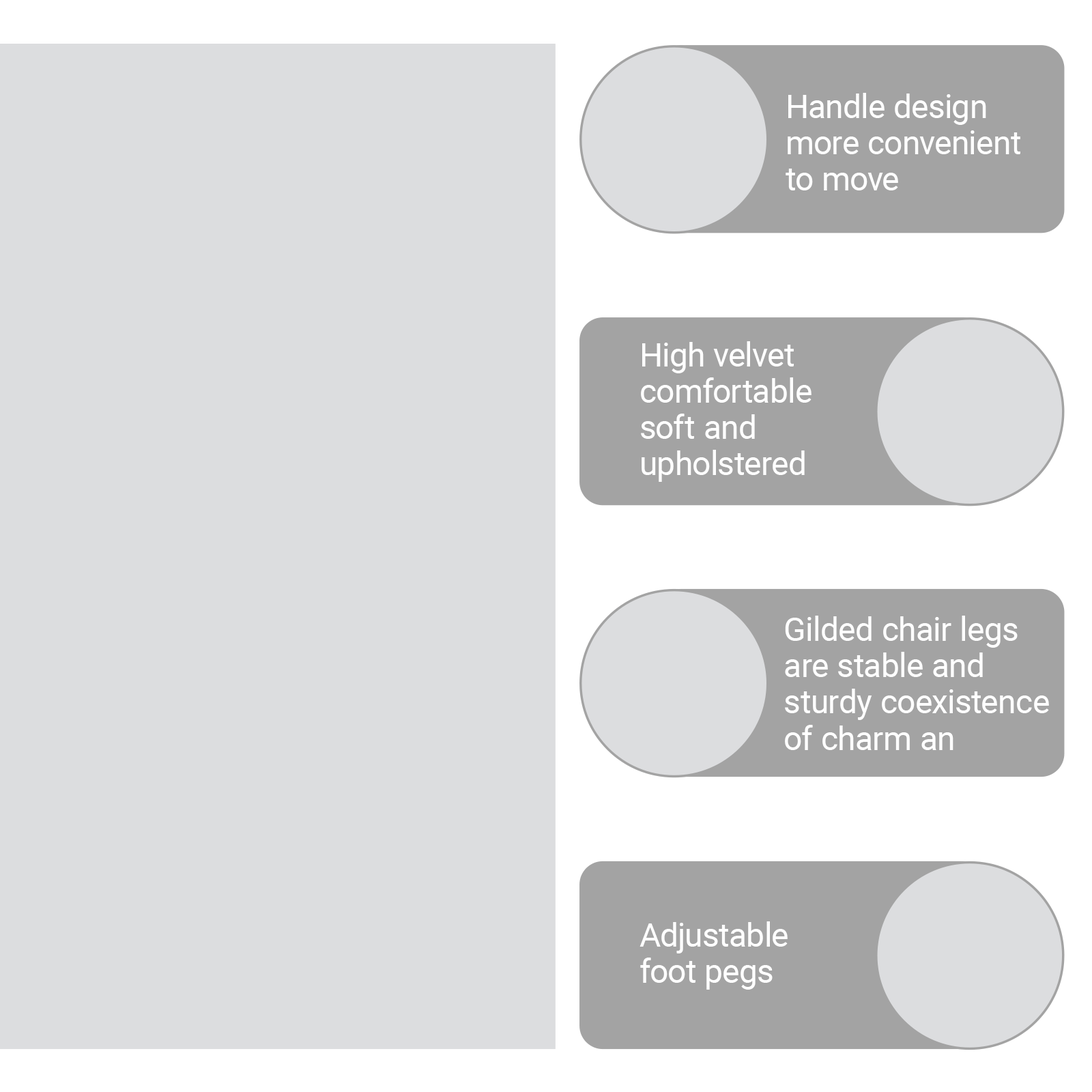
<style>
.page{position:relative;width:1092px;height:1092px;background:#dcdddf}
.page>*{position:absolute;margin:0}
.t1{font:32.6px/36.4px "Roboto-Regular";color:#ffffff}
.t2{font:32.5px/36.3px "Roboto-Regular";color:#ffffff}
</style>
<div class="page">
<p class="t1" style="left:786px;top:93px;width:234px;height:97px">Handle design<br>more convenient<br>to move</p>
<p class="t2" style="left:641px;top:341px;width:170px;height:141px">High velvet <br>comfortable<br>soft and<br>upholstered</p>
<p class="t1" style="left:785px;top:616px;width:264px;height:134px">Gilded chair legs<br>are stable and<br>sturdy coexistence <br>of charm an</p>
<p class="t2" style="left:639px;top:921px;width:149px;height:69px">Adjustable<br>foot pegs</p>
</div>
